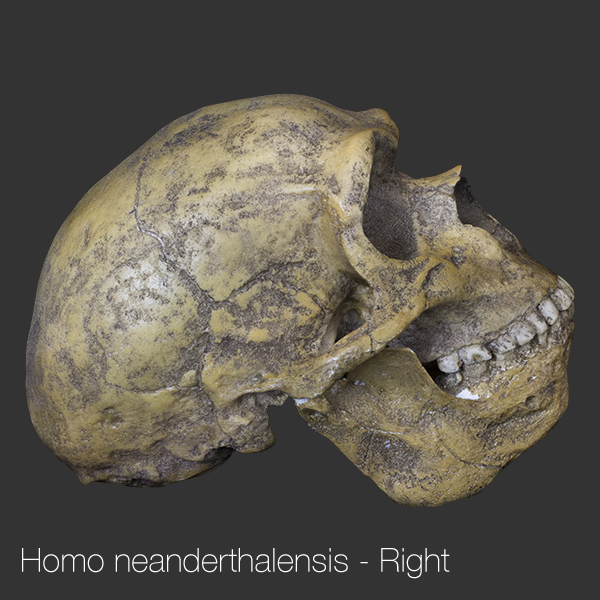
<style>
.page{position:relative;width:600px;height:600px;background:#333333}
.page>*{position:absolute;margin:0}
.t1{font:33.3px "HelveticaNeue-Thin";color:#ffffff}
</style>
<div class="page">
<p class="t1" style="left:22px;top:548px;width:428px;height:31px">Homo neanderthalensis - Right</p>
</div>
